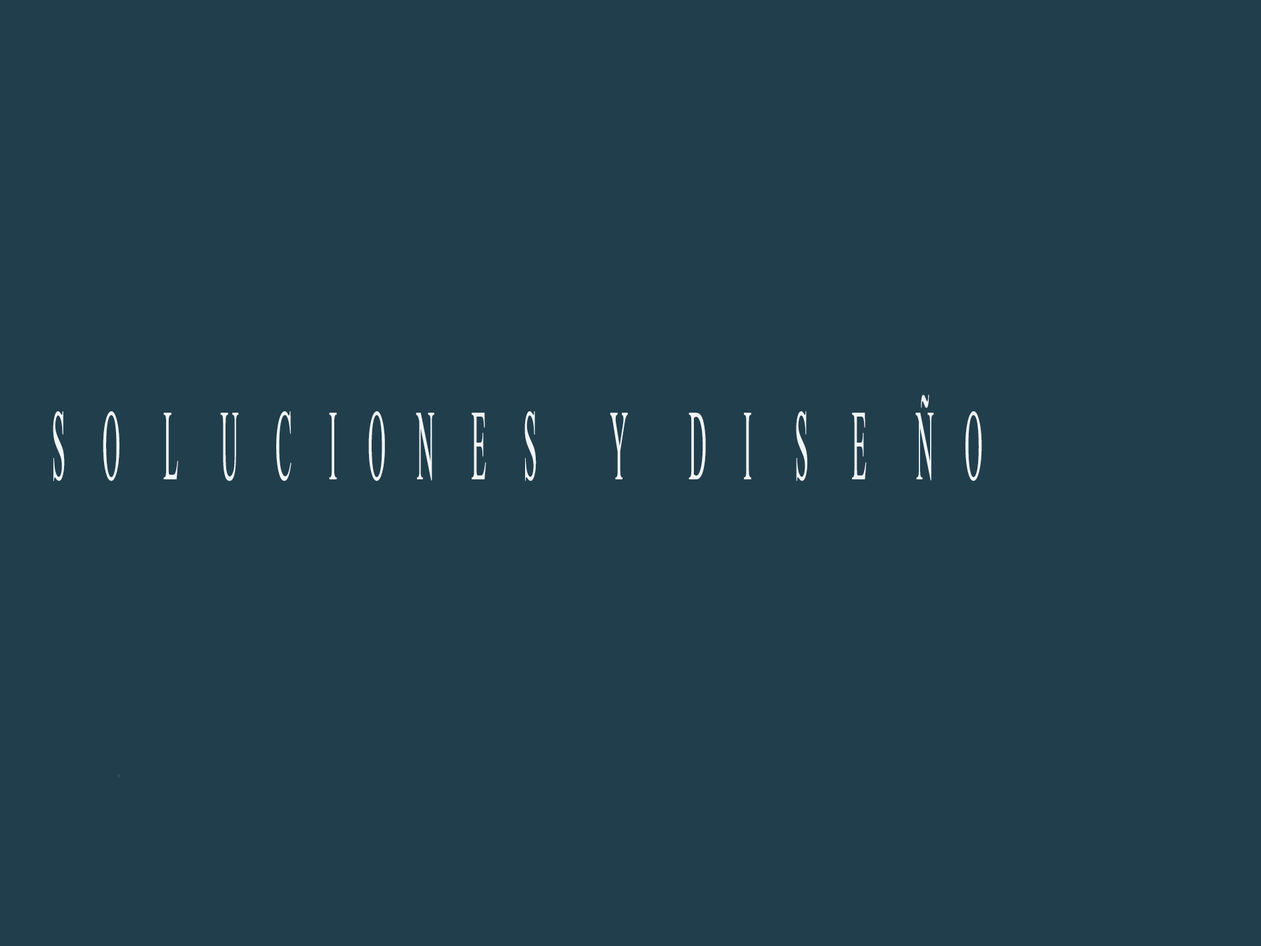
<style>
.page{position:relative;width:1261px;height:946px;background:#213e4d}
.page>*{position:absolute;margin:0}
.t1{font:100.1px "TimesNewRomanPSMT";color:#f0f5f7;scale:0.25 1}
</style>
<div class="page">
<p class="t1" style="left:53px;top:394px;width:929px;height:87px">S      O       L       U      C      I     O     N      E      S            Y          D      I       S       E        Ñ     O</p>
</div>
